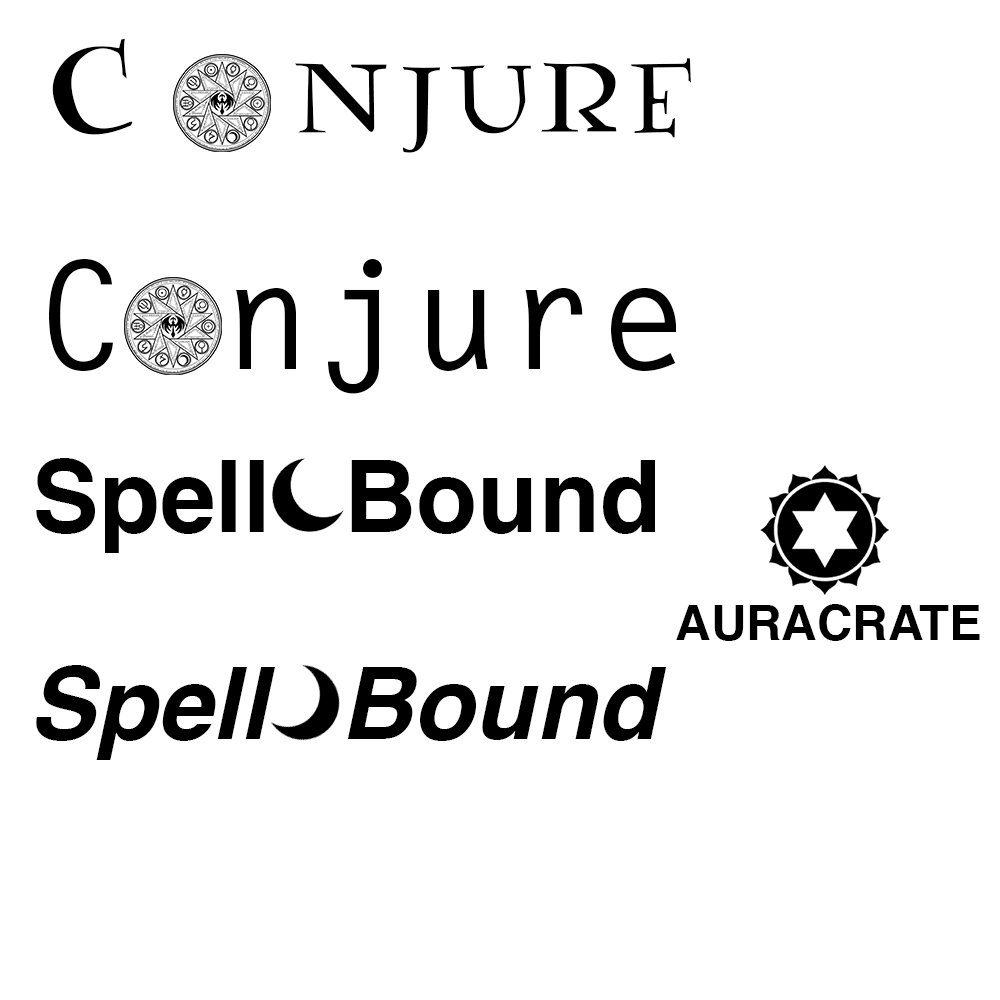
<style>
.page{position:relative;width:1000px;height:1000px;background:#ffffff}
.page>*{position:absolute;margin:0}
.t1{font:150px "Lumos";letter-spacing:0.03em;color:#000000}
.t2{font:150px "LetterGothicStd-Bold";letter-spacing:0.025em;color:#000000}
.t3{font:100px "Helvetica-Bold";color:#000000}
.t4{font:49.1px "Helvetica-Bold";color:#000000}
.t5{font:100px "Helvetica-BoldOblique";color:#000000}
</style>
<div class="page">
<p class="t1" style="left:52px;top:38px;width:639px;height:115px">C   njure</p>
<p class="t2" style="left:49px;top:258px;width:627px;height:136px">C njure</p>
<p class="t3" style="left:36px;top:458px;width:228px;height:95px">Spell</p>
<p class="t3" style="left:351px;top:460px;width:304px;height:74px">Bound</p>
<p class="t4" style="left:676px;top:604px;width:304px;height:37px">AURACRATE</p>
<p class="t5" style="left:36px;top:665px;width:239px;height:95px">Spell</p>
<p class="t5" style="left:347px;top:667px;width:320px;height:74px">Bound</p>
</div>
